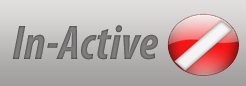
<style>
.page{position:relative;width:246px;height:86px}
.page>*{position:absolute;margin:0}
.t1{font:49px "MyriadPro-BoldCondIt";color:#7f7f7f}
</style>
<div class="page">
<p class="t1" style="left:12px;top:25px;width:146px;height:35px">In-Active</p>
</div>
